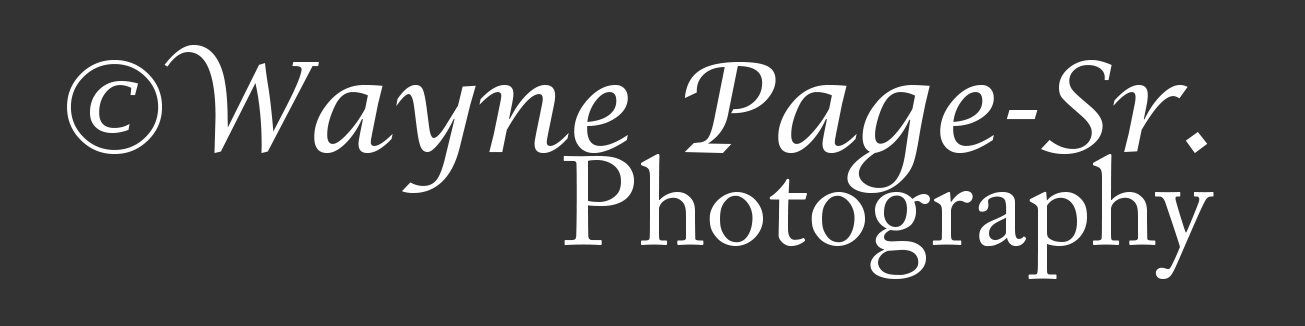
<style>
.page{position:relative;width:1305px;height:326px;background:#333333}
.page>*{position:absolute;margin:0}
.t1{font:125px "LucidaCalligraphy-Italic";color:#ffffff}
.t2{font:125px "ACaslonPro-Regular";color:#ffffff}
</style>
<div class="page">
<p class="t1" style="left:67px;top:45px;width:1141px;height:148px">©Wayne Page-Sr.</p>
<p class="t2" style="left:563px;top:154px;width:651px;height:125px">Photography</p>
</div>
